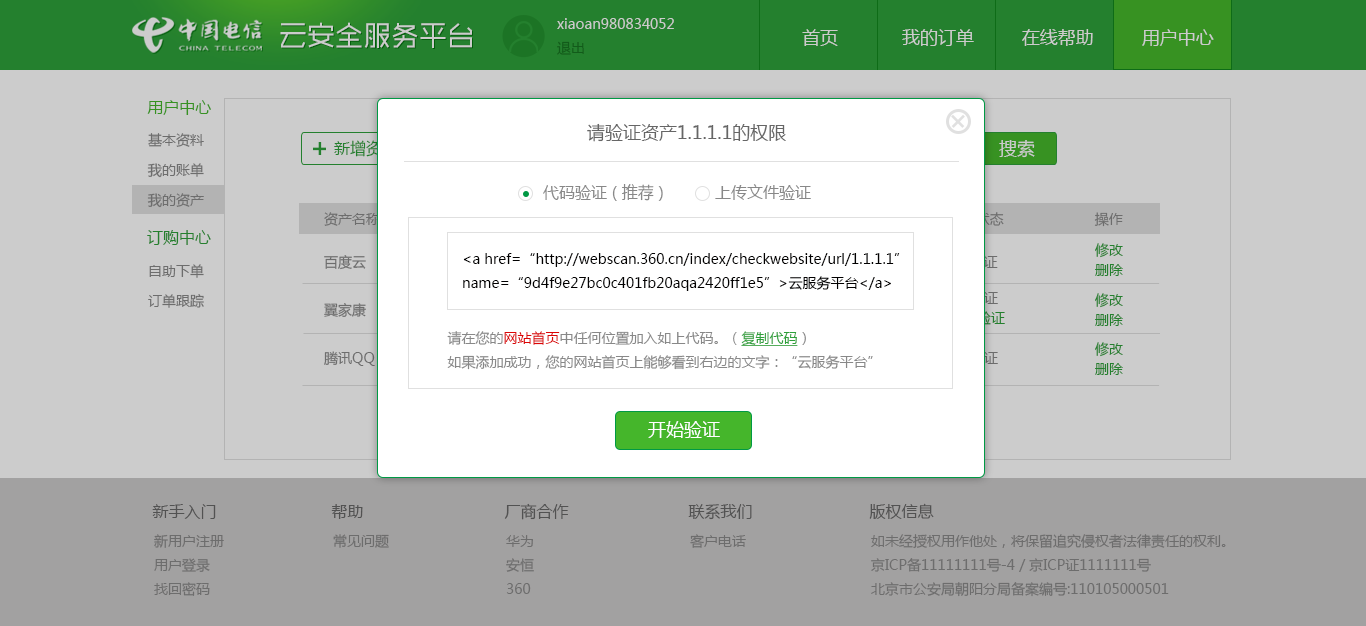
<style>
.page{position:relative;width:1366px;height:626px;background:#cccccc}
.page>*{position:absolute;margin:0}
.t1{font:28px "MFShangHei_Noncommercial-Regular";color:#cccccc}
.t2{font:28px "MFShangHei_Noncommercial-Regular"}
.t3{font:14px/24px "MicrosoftYaHei";color:#cccccc}
.t4{font:18px "MicrosoftYaHei";color:#cccccc}
.t5{font:16px "MicrosoftYaHei";color:#379222}
.t6{font:18px "MicrosoftYaHei";color:#666666}
.t7{font:14px/30px "MicrosoftYaHei";color:#6d6d6d}
.t8{font:16px "MicrosoftYaHei"}
.t9{font:16px "MicrosoftYaHei";color:#888888}
.t10{font:16px "MicrosoftYaHei";color:#24802e}
.t11{font:14px/20px "MicrosoftYaHei";color:#24802e}
.t12{font:14px/24px "MicrosoftYaHei";color:#010000}
.t13{font:14px/24px "MicrosoftYaHei";color:#888888}
.t14{font:14px/24px "MicrosoftYaHei";color:#db0606}
.t15{font:14px/24px "MicrosoftYaHei";color:#2da039;text-decoration:underline}
.t16{font:18px "MicrosoftYaHei";color:#ffffff}
.t17{font:16px "MicrosoftYaHei";color:#666666}
.t18{font:14px/24px "MicrosoftYaHei";color:#6d6d6d}
.t19{font:14px "MicrosoftYaHei";color:#6d6d6d}
</style>
<div class="page">
<p class="t1" style="left:280px;top:22px;width:192px;height:26px">云安全服务平台</p>
<p class="t2" style="left:281px;top:23px;width:192px;height:26px">云安全服务平台</p>
<p class="t3" style="left:557px;top:18px;width:117px;height:37px">xiaoan980834052<br>退出</p>
<p class="t4" style="left:802px;top:29px;width:412px;height:17px">首页            我的订单         在线帮助         用户中心</p>
<p class="t5" style="left:147px;top:100px;width:64px;height:15px">用户中心</p>
<p class="t6" style="left:587px;top:123px;width:199px;height:19px">请验证资产1.1.1.1的权限</p>
<p class="t7" style="left:147px;top:133px;width:57px;height:75px">基本资料<br>我的账单<br>我的资产</p>
<p class="t8" style="left:334px;top:140px;width:64px;height:17px">新增资产</p>
<p class="t4" style="left:999px;top:140px;width:36px;height:18px">搜索</p>
<p class="t9" style="left:543px;top:184px;width:120px;height:17px">代码验证 ( 推荐 )</p>
<p class="t9" style="left:715px;top:184px;width:96px;height:16px">上传文件验证</p>
<p class="t10" style="left:147px;top:230px;width:64px;height:15px">订购中心</p>
<p class="t11" style="left:1095px;top:243px;width:28px;height:33px">修改<br>删除</p>
<p class="t12" style="left:463px;top:253px;width:437px;height:38px">&lt;a href=“http://webscan.360.cn/index/checkwebsite/url/1.1.1.1”<br>name=“9d4f9e27bc0c401fb20aqa2420ff1e5”&gt;云服务平台&lt;/a&gt;</p>
<p class="t7" style="left:148px;top:264px;width:56px;height:44px">自助下单<br>订单跟踪</p>
<p class="t11" style="left:1095px;top:293px;width:28px;height:33px">修改<br>删除</p>
<p class="t13" style="left:447px;top:331px;width:426px;height:39px">请在您的<span class="t14">网站首页</span>中任何位置加入如上代码。（<span class="t15">复制代码</span>）<br>如果添加成功，您的网站首页上能够看到右边的文字：“云服务平台”</p>
<p class="t11" style="left:1095px;top:342px;width:28px;height:33px">修改<br>删除</p>
<p class="t16" style="left:648px;top:421px;width:72px;height:17px">开始验证</p>
<p class="t17" style="left:152px;top:504px;width:64px;height:15px">新手入门</p>
<p class="t17" style="left:331px;top:504px;width:32px;height:15px">帮助</p>
<p class="t17" style="left:504px;top:503px;width:65px;height:17px">厂商合作</p>
<p class="t17" style="left:688px;top:504px;width:64px;height:16px">联系我们</p>
<p class="t17" style="left:869px;top:503px;width:65px;height:16px">版权信息</p>
<p class="t18" style="left:154px;top:534px;width:70px;height:62px">新用户注册<br>用户登录<br>找回密码</p>
<p class="t19" style="left:333px;top:534px;width:56px;height:14px">常见问题</p>
<p class="t19" style="left:690px;top:534px;width:56px;height:14px">客户电话</p>
<p class="t18" style="left:871px;top:534px;width:355px;height:63px">如未经授权用作他处，将保留追究侵权者法律责任的权利。<br>京ICP备11111111号-4 / 京ICP证1111111号<br>北京市公安局朝阳分局备案编号:110105000501</p>
<p class="t18" style="left:506px;top:535px;width:28px;height:59px">华为<br>安恒<br>360</p>
</div>
